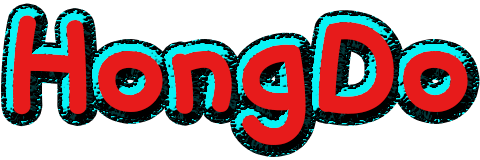
<style>
.page{position:relative;width:480px;height:160px;background:#ffffff}
.page>*{position:absolute;margin:0}
.t1{font:140px "DXRMbxB-KSCpc-EUC-H";color:#e71b1b;font-weight:bold}
</style>
<div class="page">
<p class="t1" style="left:13px;top:15px;width:455px;height:130px">HongDo</p>
</div>
